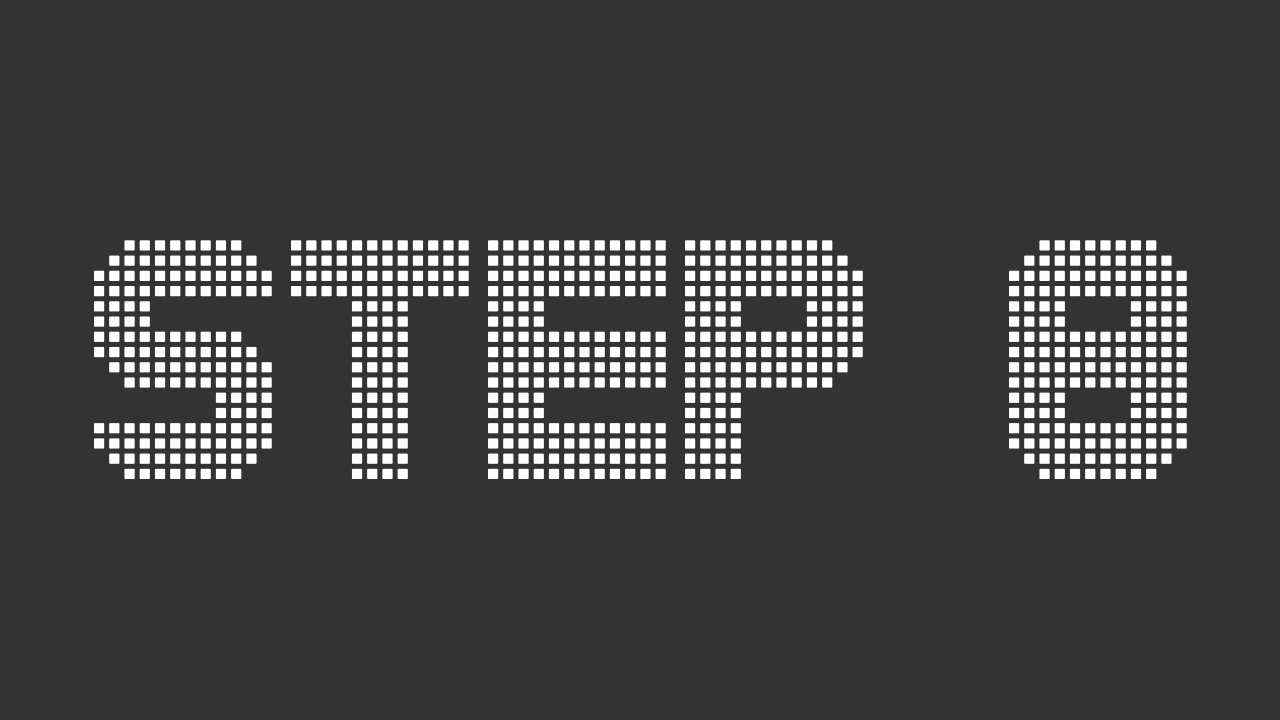
<style>
.page{position:relative;width:1280px;height:720px;background:#333333}
.page>*{position:absolute;margin:0}
.t1{font:260px "TheLedDisplaySt";color:#fefefe}
</style>
<div class="page">
<p class="t1" style="left:94px;top:240px;width:1093px;height:239px">STEP 8</p>
</div>
